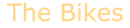
<style>
.page{position:relative;width:130px;height:28px;background:#ffffff}
.page>*{position:absolute;margin:0}
.t1{font:24px "Verdana";color:#ffd890}
</style>
<div class="page">
<p class="t1" style="left:6px;top:2px;width:117px;height:20px">The Bikes</p>
</div>
